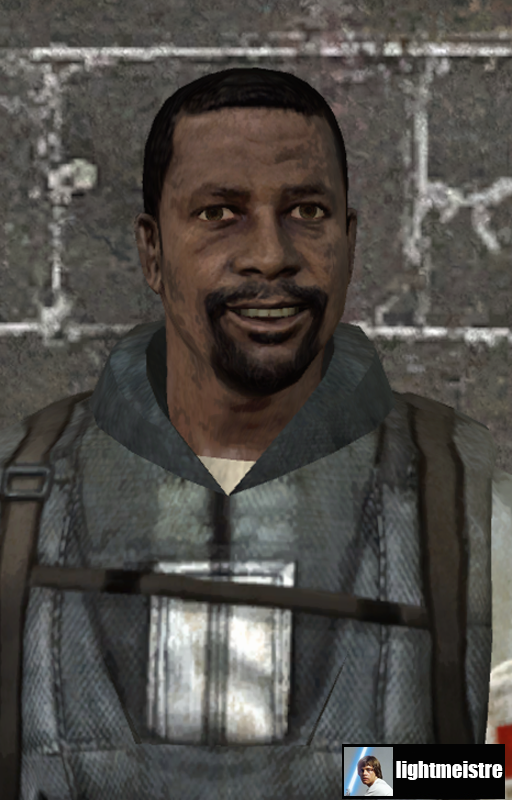
<style>
.page{position:relative;width:512px;height:800px}
.page>*{position:absolute;margin:0}
.t1{font:21px "Impact";color:#ffffff}
</style>
<div class="page">
<p class="t1" style="left:396px;top:761px;width:107px;height:19px">lightmeistre</p>
</div>
